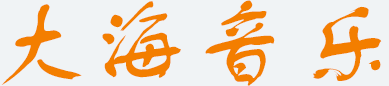
<style>
.page{position:relative;width:389px;height:86px;background:#f0f3f5}
.page>*{position:absolute;margin:0}
.t1{font:100px "FZSTK--GBK1-0";letter-spacing:0.03em;color:#f37e00}
</style>
<div class="page">
<p class="t1" style="left:1px;top:0px;width:381px;height:86px">大海音乐</p>
</div>
